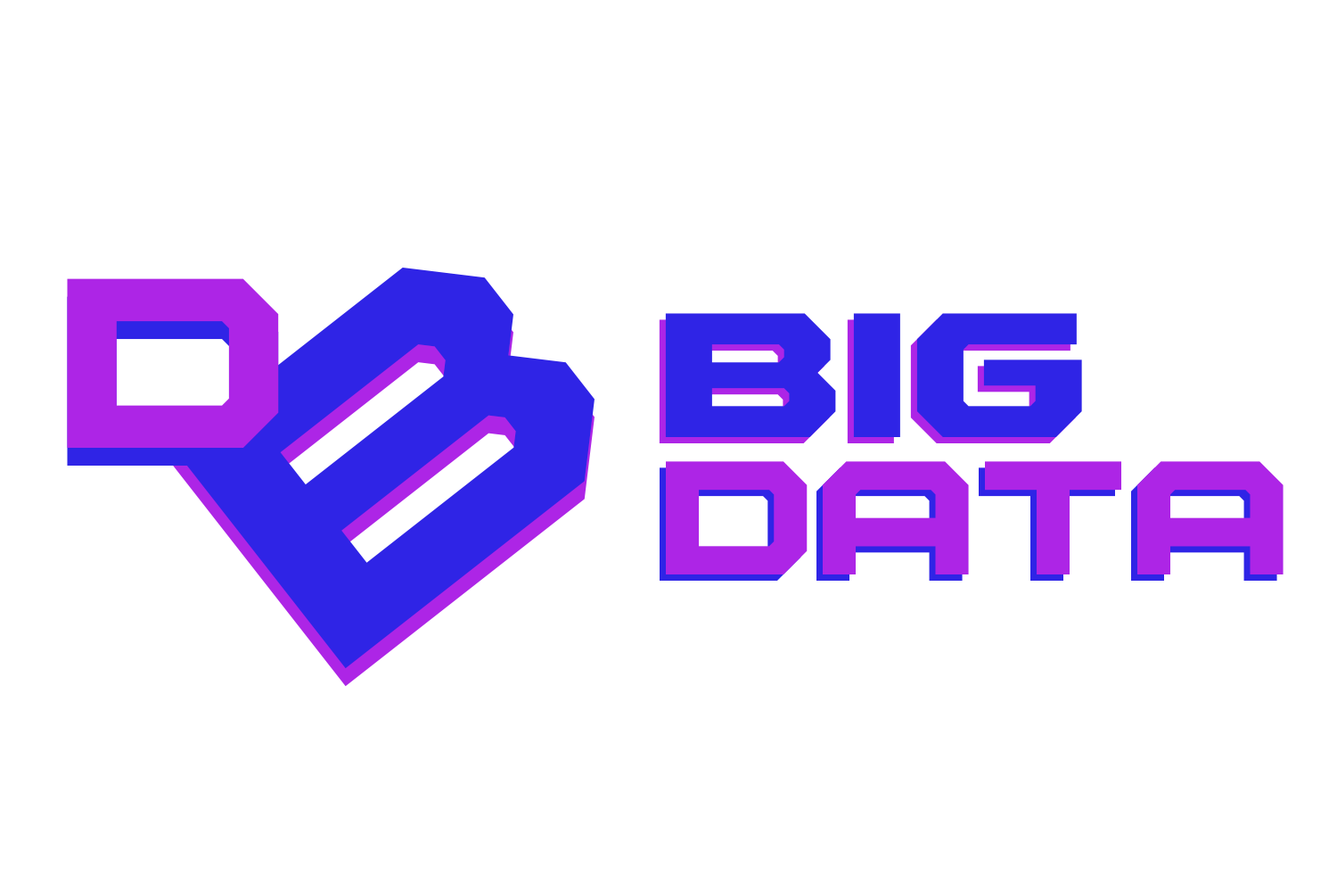
<style>
.page{position:relative;width:1337px;height:892px;background:#ffffff}
.page>*{position:absolute;margin:0}
.t1{font:400.2px "PowermaxRegular";color:#2f24e6}
.t2{font:241.1px "PowermaxRegular";color:#ad25e6}
.t3{font:176.4px "PowermaxBold";color:#2f24e6}
.t4{font:161.2px "PowermaxRegular";color:#ad25e6}
</style>
<div class="page">
<p class="t1" style="left:173px;top:267px;width:422px;height:402px;rotate:-38deg">B</p>
<p class="t2" style="left:67px;top:278px;width:212px;height:170px">D</p>
<p class="t3" style="left:665px;top:313px;width:417px;height:124px">big</p>
<p class="t4" style="left:666px;top:461px;width:618px;height:113px">data</p>
</div>
